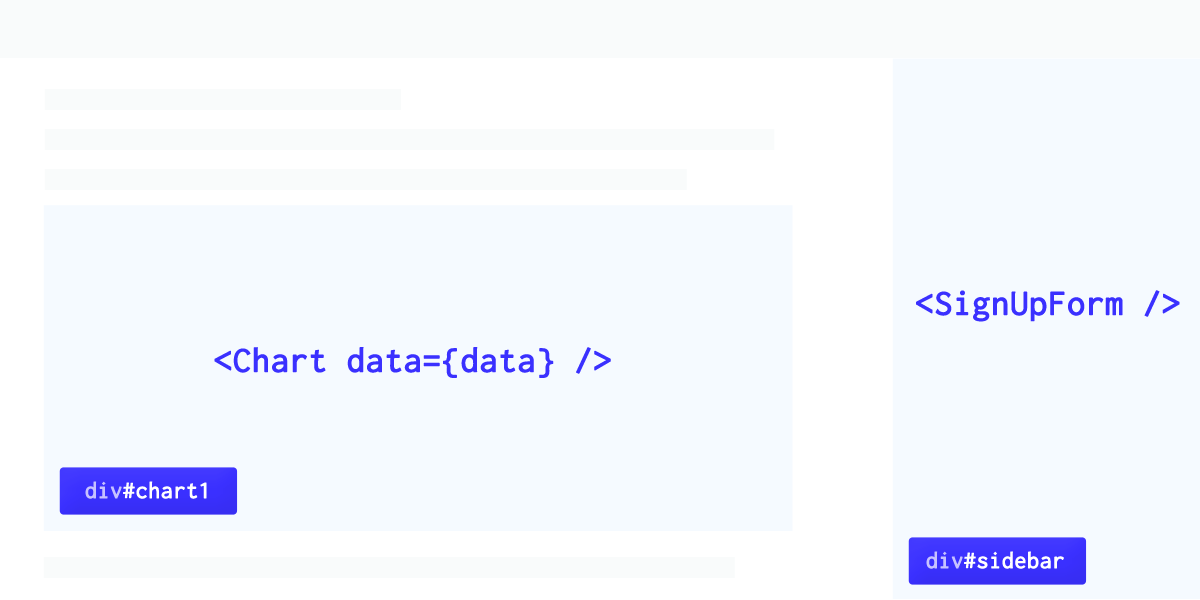
<style>
.page{position:relative;width:1200px;height:600px;background:#f5faff}
.page>*{position:absolute;margin:0}
.t1{font:36px "Inconsolata";color:#3a30ff;font-weight:bold}
.t2{font:24px "Inconsolata";color:#ffffff;font-weight:bold}
.t3{font:24px "Inconsolata";color:#c7c2ff;font-weight:bold}
</style>
<div class="page">
<p class="t1" style="left:916px;top:290px;width:264px;height:32px">&lt;SignUpForm /&gt;</p>
<p class="t1" style="left:214px;top:347px;width:397px;height:31px">&lt;Chart data={data} /&gt;</p>
<p class="t2" style="left:85px;top:481px;width:122px;height:18px"><span class="t3">div</span>#chart1</p>
<p class="t2" style="left:926px;top:551px;width:138px;height:18px"><span class="t3">div</span>#sidebar</p>
</div>
